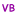
<style>
.page{position:relative;width:16px;height:16px;background:#ffffff}
.page>*{position:absolute;margin:0}
.t1{font:10px "ComicSansMS-Bold";color:#9605a3}
</style>
<div class="page">
<p class="t1" style="left:2px;top:4px;width:13px;height:8px">VB</p>
</div>
